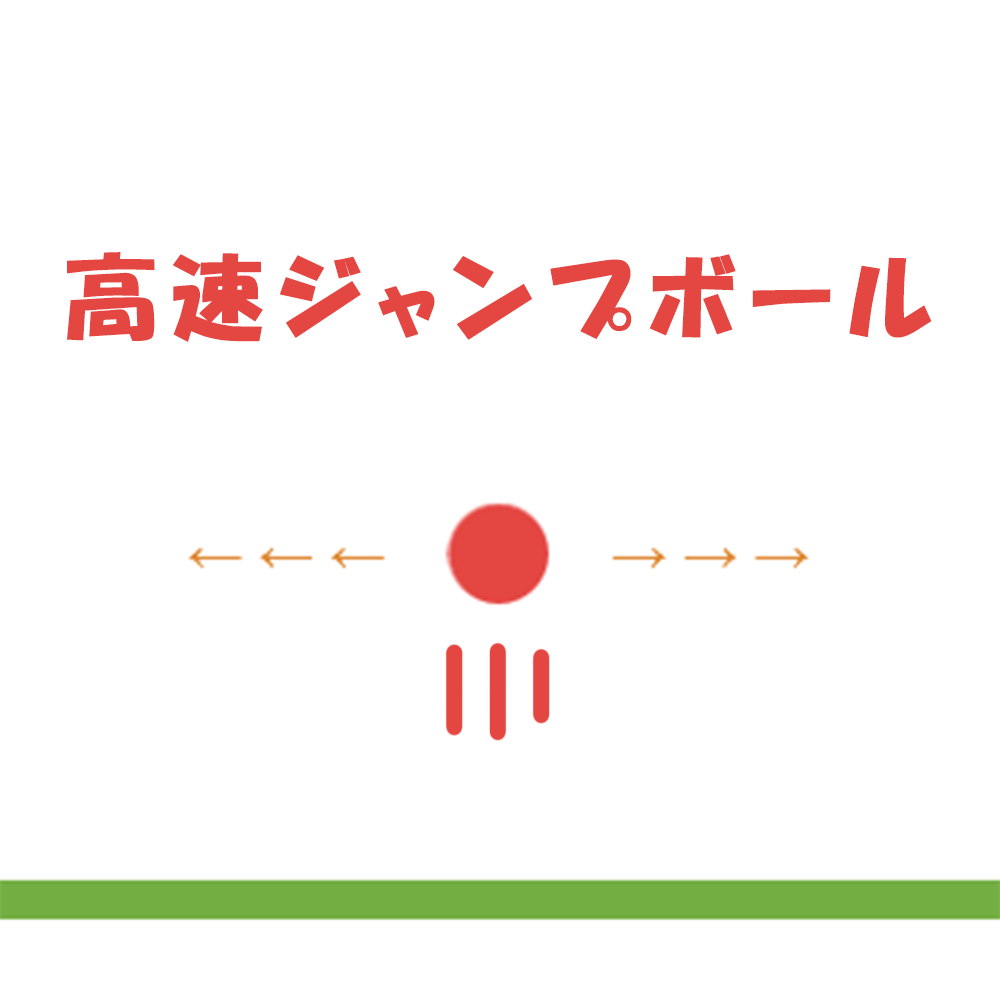
<style>
.page{position:relative;width:1000px;height:1000px;background:#ffffff}
.page>*{position:absolute;margin:0}
.t1{font:91.7px "HGPSoeiKakupoptai";letter-spacing:0.14em;color:#e44642;font-weight:bold}
</style>
<div class="page">
<p class="t1" style="left:67px;top:252px;width:865px;height:90px">高速ジャンプボール</p>
</div>
